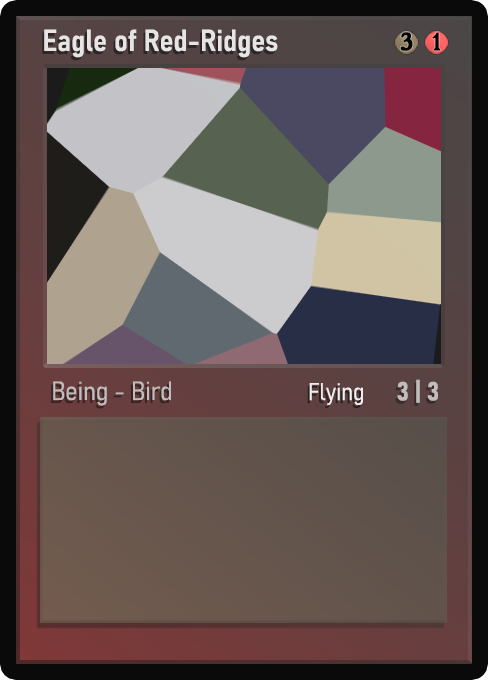
<style>
.page{position:relative;width:488px;height:680px}
.page>*{position:absolute;margin:0}
.t1{font:30px "Bahnschrift-SemiBoldSemiCondensed";color:#f2f2f2;font-weight:bold}
.t2{font:25px "WTRRoycroft";color:#000000;font-weight:bold;scale:1.09 1}
.t3{font:26px "Bahnschrift-LightSemiCondensed";color:#c8c8c8;font-weight:bold}
.t4{font:24px "Bahnschrift-LightSemiCondensed";color:#f0efef;font-weight:bold}
.t5{font:26px "Bahnschrift-BoldSemiCondensed";color:#c1bdbd;font-weight:bold}
</style>
<div class="page">
<p class="t1" style="left:44px;top:29px;width:234px;height:29px;opacity:0.9">Eagle of Red-Ridges</p>
<p class="t2" style="left:400px;top:32px;width:13px;height:19px">3</p>
<p class="t2" style="left:432px;top:32px;width:9px;height:19px">1</p>
<p class="t3" style="left:53px;top:381px;width:118px;height:25px;opacity:0.9">Being - Bird</p>
<p class="t4" style="left:309px;top:383px;width:54px;height:23px">Flying</p>
<p class="t5" style="left:397px;top:379px;width:41px;height:24px">3 | 3</p>
</div>
